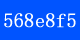
<style>
.page{position:relative;width:80px;height:40px;background:#0054ff}
.page>*{position:absolute;margin:0}
.t1{font:20px "SimSun";color:#ffffff;font-weight:bold}
</style>
<div class="page">
<p class="t1" style="left:4px;top:13px;width:72px;height:15px">568e8f5</p>
</div>
